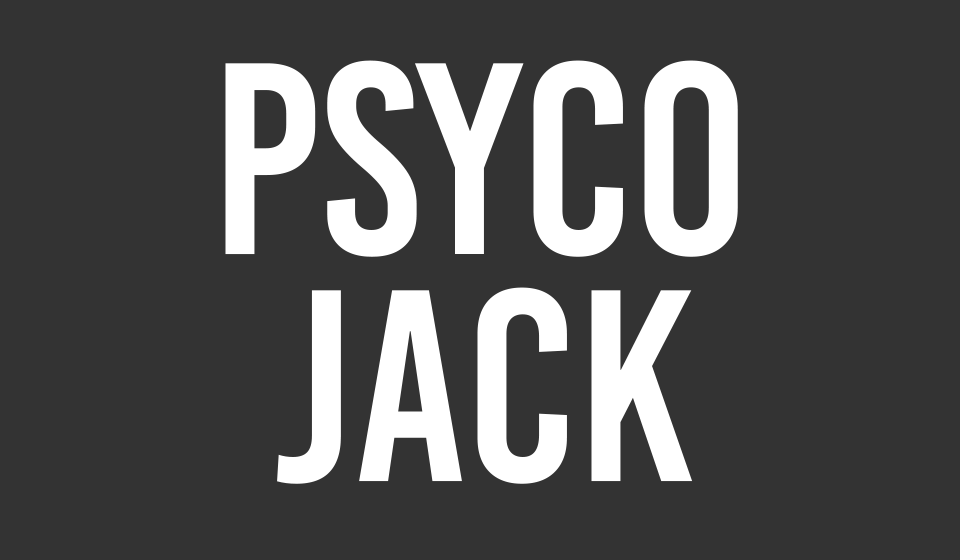
<style>
.page{position:relative;width:960px;height:560px;background:#333333}
.page>*{position:absolute;margin:0}
.t1{font:272.4px "BebasKai";color:#ffffff}
.t2{font:272.4px/227px "BebasKai";color:#ffffff}
</style>
<div class="page">
<p class="t1" style="left:225px;top:60px;width:513px;height:424px;text-align:center">psyco<br><span class="t2">jack</span></p>
</div>
